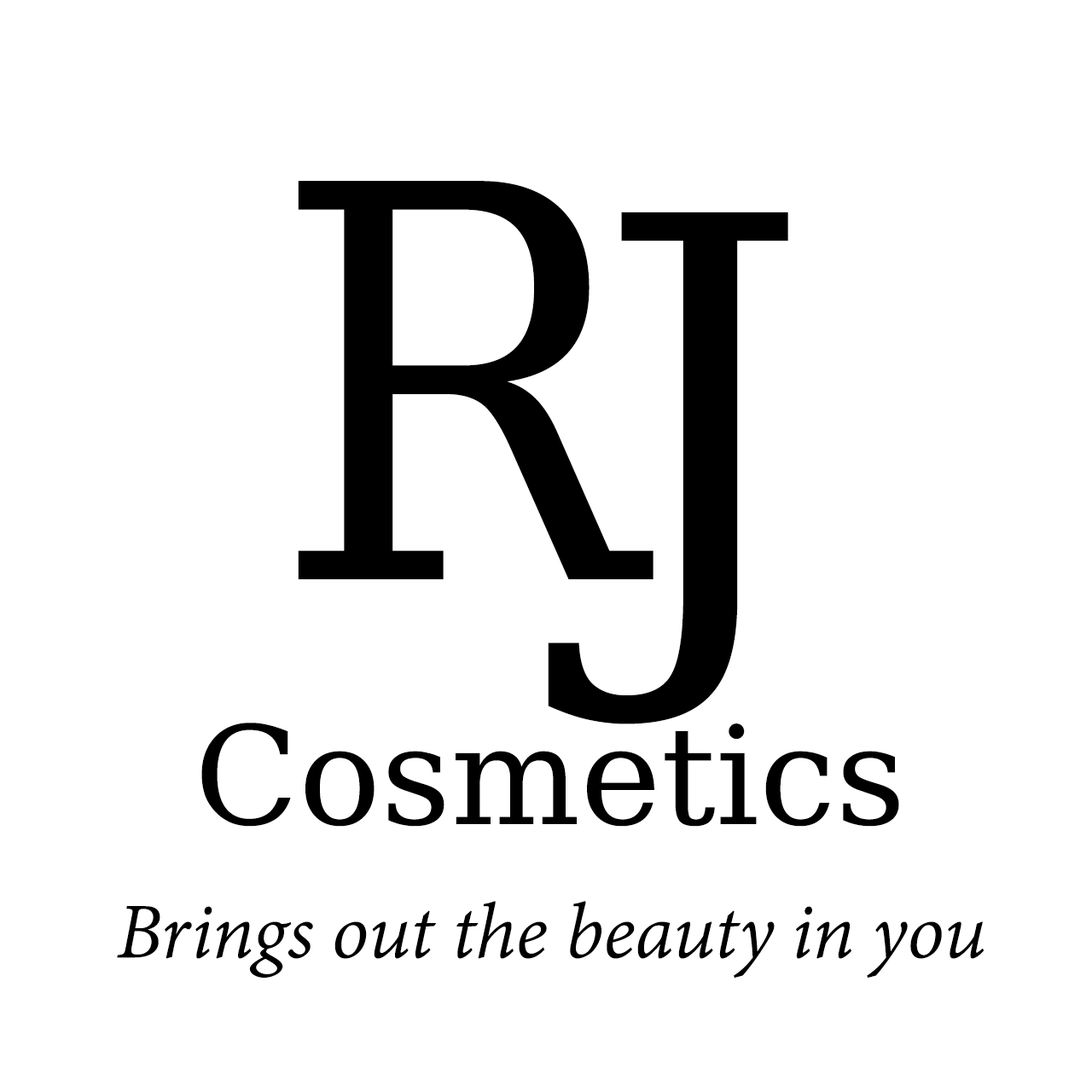
<style>
.page{position:relative;width:1092px;height:1092px;background:#ffffff}
.page>*{position:absolute;margin:0}
.t1{font:546px "DejaVuSerifCondensed";color:#000000}
.t2{font:546px "DejaVuMathTeXGyre-Regular";color:#000000}
.t3{font:136.5px "DejaVuMathTeXGyre-Regular";color:#000000}
.t4{font:85.3px "AdobeDevanagari-Italic";color:#000000}
</style>
<div class="page">
<p class="t1" style="left:298px;top:181px;width:355px;height:398px">R</p>
<p class="t2" style="left:548px;top:212px;width:240px;height:512px">J</p>
<p class="t3" style="left:201px;top:723px;width:698px;height:104px">Cosmetics</p>
<p class="t4" style="left:117px;top:901px;width:867px;height:77px">Brings out the beauty in you</p>
</div>
